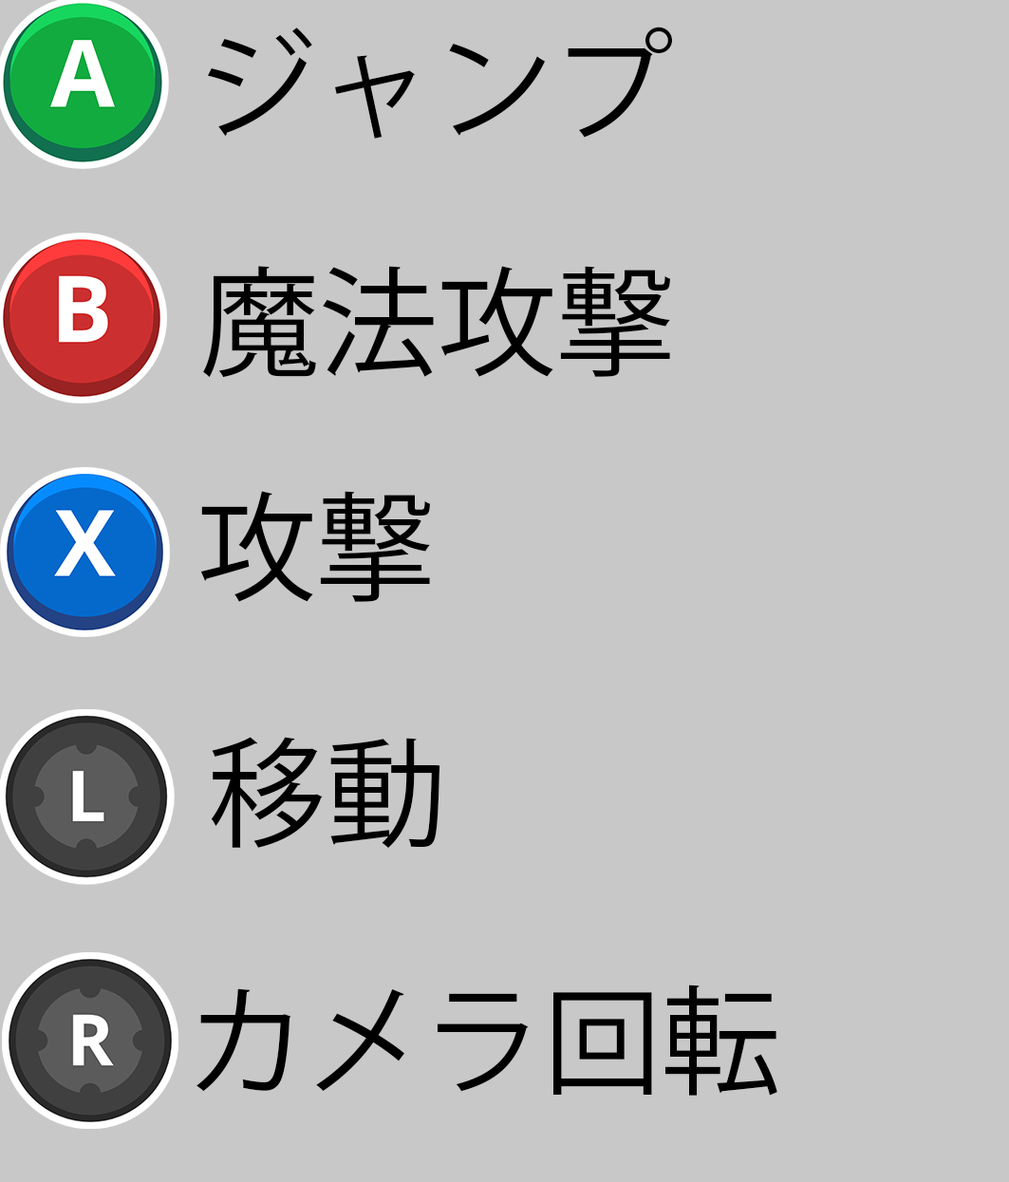
<style>
.page{position:relative;width:1009px;height:1182px;background:#c8c8c8}
.page>*{position:absolute;margin:0}
.t1{font:118.7px "KozGoPr6N-Regular";color:#000000}
</style>
<div class="page">
<p class="t1" style="left:208px;top:27px;width:464px;height:112px">ジャンプ</p>
<p class="t1" style="left:203px;top:266px;width:467px;height:112px">魔法攻撃</p>
<p class="t1" style="left:200px;top:491px;width:230px;height:111px">攻撃</p>
<p class="t1" style="left:211px;top:737px;width:229px;height:111px">移動</p>
<p class="t1" style="left:196px;top:984px;width:581px;height:111px">カメラ回転</p>
</div>
